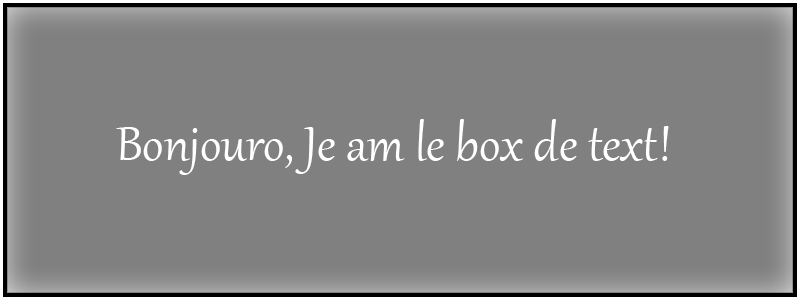
<style>
.page{position:relative;width:800px;height:300px;background:#808080}
.page>*{position:absolute;margin:0}
.t1{font:60px "Gabriola";color:#ffffff}
</style>
<div class="page">
<p class="t1" style="left:116px;top:119px;width:553px;height:56px">Bonjouro, Je am le box de text!</p>
</div>
